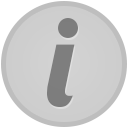
<style>
.page{position:relative;width:128px;height:128px;background:#ffffff}
.page>*{position:absolute;margin:0}
.t1{font:125px "Lobster1.3";color:#7e7e7e}
</style>
<div class="page">
<p class="t1" style="left:47px;top:18px;width:31px;height:89px">i</p>
</div>
